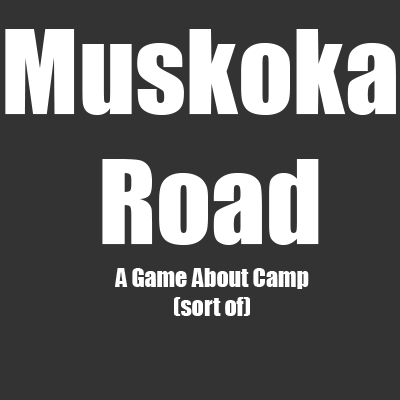
<style>
.page{position:relative;width:400px;height:400px;background:#333333}
.page>*{position:absolute;margin:0}
.t1{font:108.4px "Impact";color:#ffffff}
.t2{font:24px "Impact";color:#ffffff}
</style>
<div class="page">
<p class="t1" style="left:5px;top:29px;width:391px;height:216px;text-align:center">Muskoka <br>Road</p>
<p class="t2" style="left:115px;top:268px;width:194px;height:48px;text-align:center">A Game About Camp<br>(sort of)</p>
</div>
